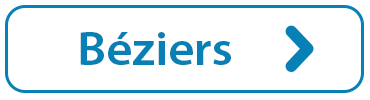
<style>
.page{position:relative;width:370px;height:100px;background:#ffffff}
.page>*{position:absolute;margin:0}
.t1{font:48px "MyriadPro-Semibold";color:#0780b5;scale:1.06 1}
</style>
<div class="page">
<p class="t1" style="left:80px;top:32px;width:151px;height:33px">Béziers</p>
</div>
